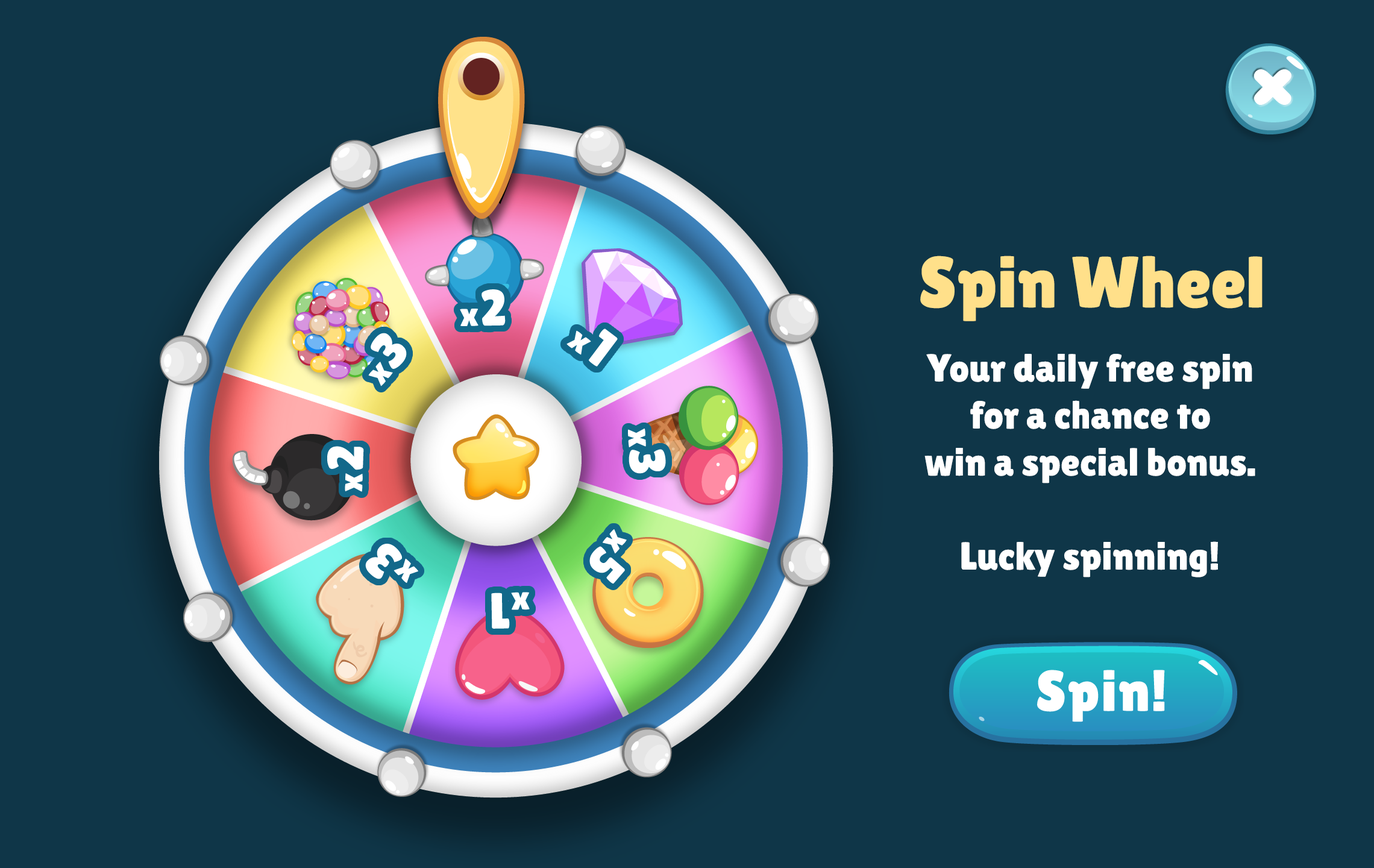
<style>
.page{position:relative;width:1374px;height:868px;background:#0f3648}
.page>*{position:absolute;margin:0}
.t1{font:72.3px "LilitaOne";color:#ffe08a}
.t2{font:39.2px "LilitaOne";color:#ffffff}
</style>
<div class="page">
<p class="t1" style="left:920px;top:256px;width:343px;height:65px">Spin Wheel</p>
<p class="t2" style="left:924px;top:354px;width:331px;height:223px;text-align:center">Your daily free spin<br>for a chance to<br>win a special bonus.<br><br>Lucky spinning!</p>
</div>
